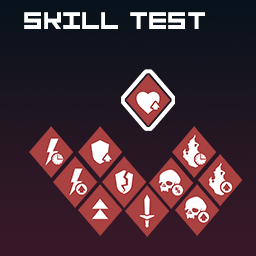
<style>
.page{position:relative;width:256px;height:256px}
.page>*{position:absolute;margin:0}
.t1{font:24px "STSimpleSquareRegular";color:#ffffff}
</style>
<div class="page">
<p class="t1" style="left:24px;top:12px;width:181px;height:17px">SKILL TEST</p>
</div>
